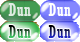
<style>
.page{position:relative;width:80px;height:42px}
.page>*{position:absolute;margin:0}
.t1{font:18px "Rockwell-Condensed";letter-spacing:0.025em;color:#ddece1}
.t2{font:18px "Rockwell-Condensed";letter-spacing:0.025em;color:#ffffff}
.t3{font:18px "Rockwell-Condensed";letter-spacing:0.025em}
</style>
<div class="page">
<p class="t1" style="left:8px;top:3px;width:23px;height:13px">Dun</p>
<p class="t2" style="left:48px;top:3px;width:23px;height:13px">Dun</p>
<p class="t3" style="left:8px;top:25px;width:23px;height:13px">Dun</p>
<p class="t3" style="left:48px;top:25px;width:23px;height:13px">Dun</p>
</div>
